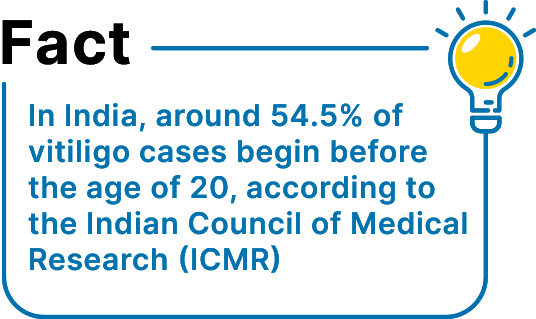
<style>
.page{position:relative;width:536px;height:319px;background:#ffffff}
.page>*{position:absolute;margin:0}
.t1{font:60px "Inter-Bold";letter-spacing:0.025em;color:#000000}
.t2{font:30px "Inter-SemiBold";letter-spacing:0.025em;color:#0072ae}
</style>
<div class="page">
<p class="t1" style="left:2px;top:20px;width:128px;height:45px">Fact</p>
<p class="t1" style="left:2px;top:20px;width:128px;height:45px">Fact</p>
<p class="t2" style="left:28px;top:103px;width:439px;height:170px">In India, around 54.5% of<br>vitiligo cases begin before<br>the age of 20, according to<br>the Indian Council of Medical<br>Research (ICMR)</p>
<p class="t2" style="left:28px;top:103px;width:439px;height:170px">In India, around 54.5% of<br>vitiligo cases begin before<br>the age of 20, according to<br>the Indian Council of Medical<br>Research (ICMR)</p>
</div>
